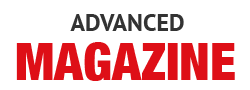
<style>
.page{position:relative;width:250px;height:90px;background:#ffffff}
.page>*{position:absolute;margin:0}
.t1{font:24px "PTSans-Bold";color:#333333}
.t2{font:52px "HelveticaNeue-CondensedBlack";color:#de0f17}
</style>
<div class="page">
<p class="t1" style="left:70px;top:14px;width:114px;height:17px">ADVANCED</p>
<p class="t2" style="left:16px;top:42px;width:219px;height:39px">MAGAZINE</p>
</div>
